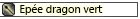
<style>
.page{position:relative;width:140px;height:19px;background:#ffffff}
.page>*{position:absolute;margin:0}
.t1{font:10.9px "LaoUI";color:#000000}
</style>
<div class="page">
<p class="t1" style="left:20px;top:4px;width:83px;height:11px">Epée dragon vert</p>
</div>
